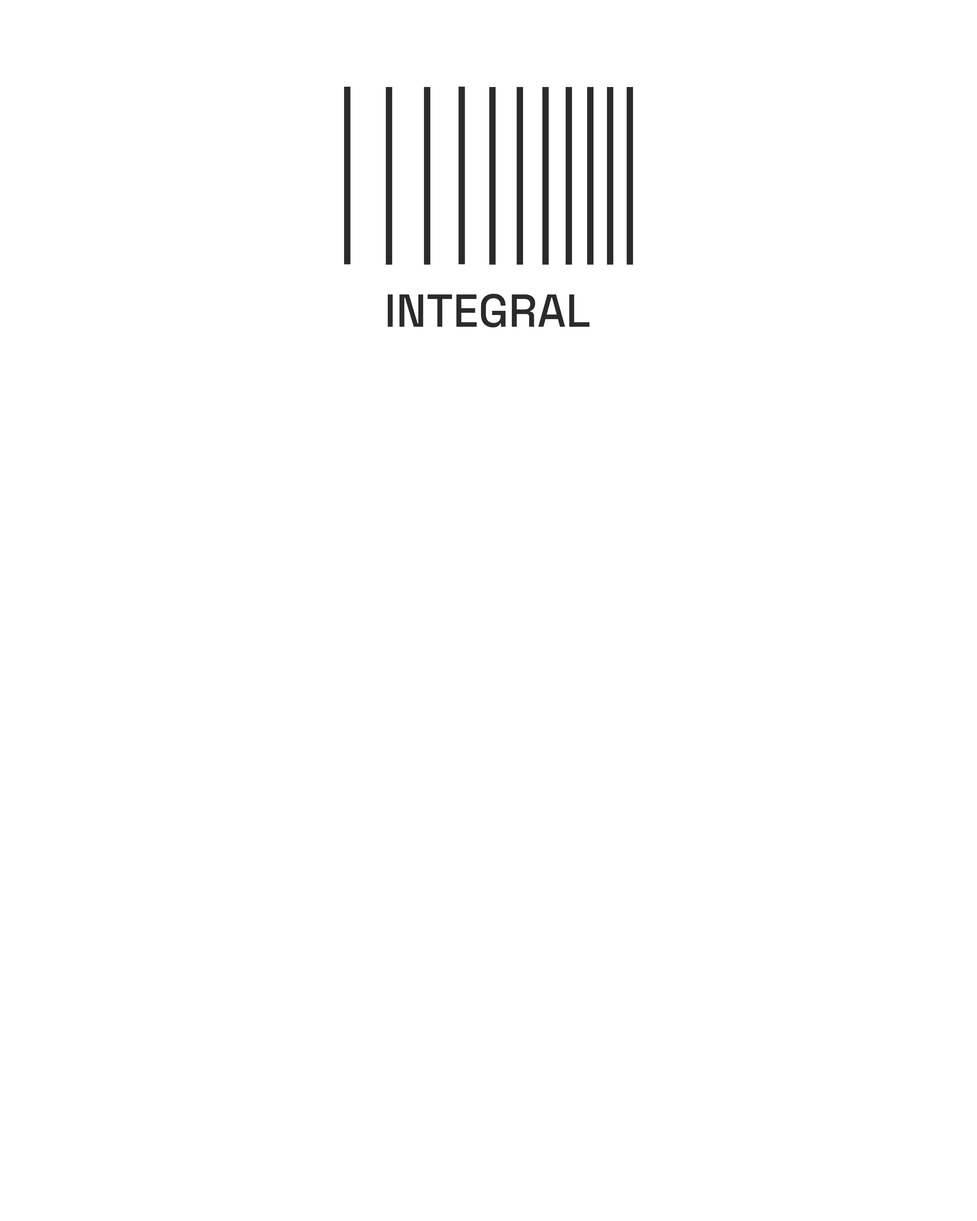
<style>
.page{position:relative;width:977px;height:1221px;background:#ffffff}
.page>*{position:absolute;margin:0}
.t1{font:46.2px "SpaceGroteskLight-Medium";color:#2b2b2b}
</style>
<div class="page">
<p class="t1" style="left:388px;top:294px;width:201px;height:33px">INTEGRAL</p>
</div>
